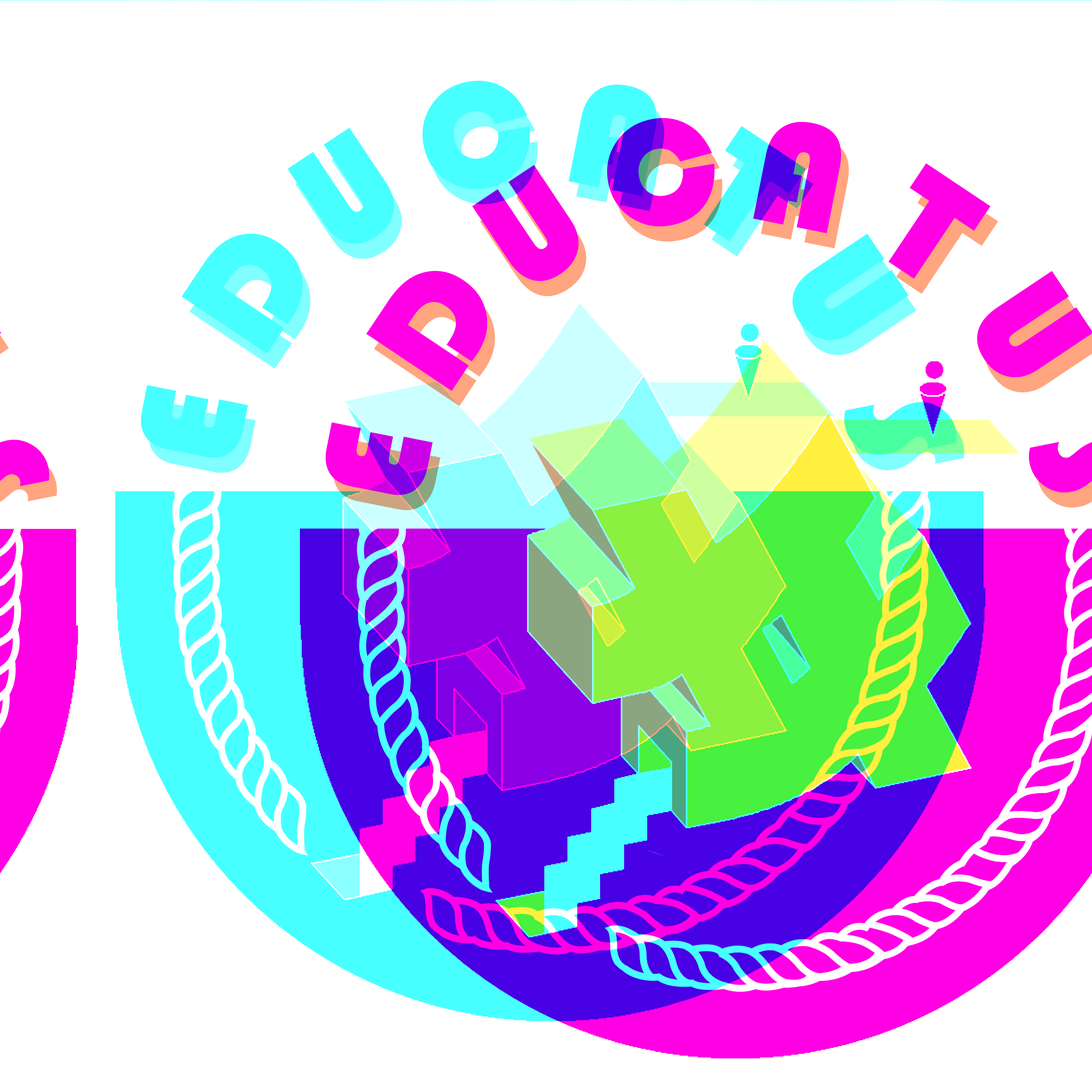
<style>
.page{position:relative;width:1092px;height:1092px;background:#ffffff}
.page>*{position:absolute;margin:0}
.t1{font:154.1px "Bauhaus93";color:#48ffff}
.t2{font:154.1px "Bauhaus93"}
</style>
<div class="page">
<p class="t1" style="left:422px;top:80px;width:108px;height:109px;rotate:-11deg">C</p>
<p class="t2" style="left:569px;top:84px;width:87px;height:112px;rotate:11deg">A</p>
<p class="t2" style="left:430px;top:95px;width:108px;height:109px;rotate:-11deg">C</p>
<p class="t2" style="left:576px;top:99px;width:88px;height:112px;rotate:11deg">A</p>
<p class="t2" style="left:704px;top:125px;width:102px;height:116px;rotate:34deg">T</p>
<p class="t1" style="left:288px;top:127px;width:106px;height:116px;rotate:-34deg">U</p>
<p class="t1" style="left:295px;top:142px;width:107px;height:117px;rotate:-34deg">U</p>
<p class="t2" style="left:712px;top:141px;width:102px;height:115px;rotate:34deg">T</p>
<p class="t1" style="left:182px;top:233px;width:121px;height:121px;rotate:-56deg">D</p>
<p class="t1" style="left:792px;top:233px;width:117px;height:107px;rotate:56deg">U</p>
<p class="t2" style="left:189px;top:248px;width:121px;height:121px;rotate:-56deg">D</p>
<p class="t2" style="left:800px;top:248px;width:116px;height:107px;rotate:56deg">U</p>
<p class="t1" style="left:141px;top:385px;width:107px;height:72px;rotate:-79deg">E</p>
<p class="t2" style="left:149px;top:400px;width:107px;height:72px;rotate:-79deg">E</p>
<p class="t2" style="left:844px;top:402px;width:113px;height:53px;rotate:79deg">S</p>
<p class="t2" style="left:852px;top:417px;width:112px;height:53px;rotate:79deg">S</p>
</div>
